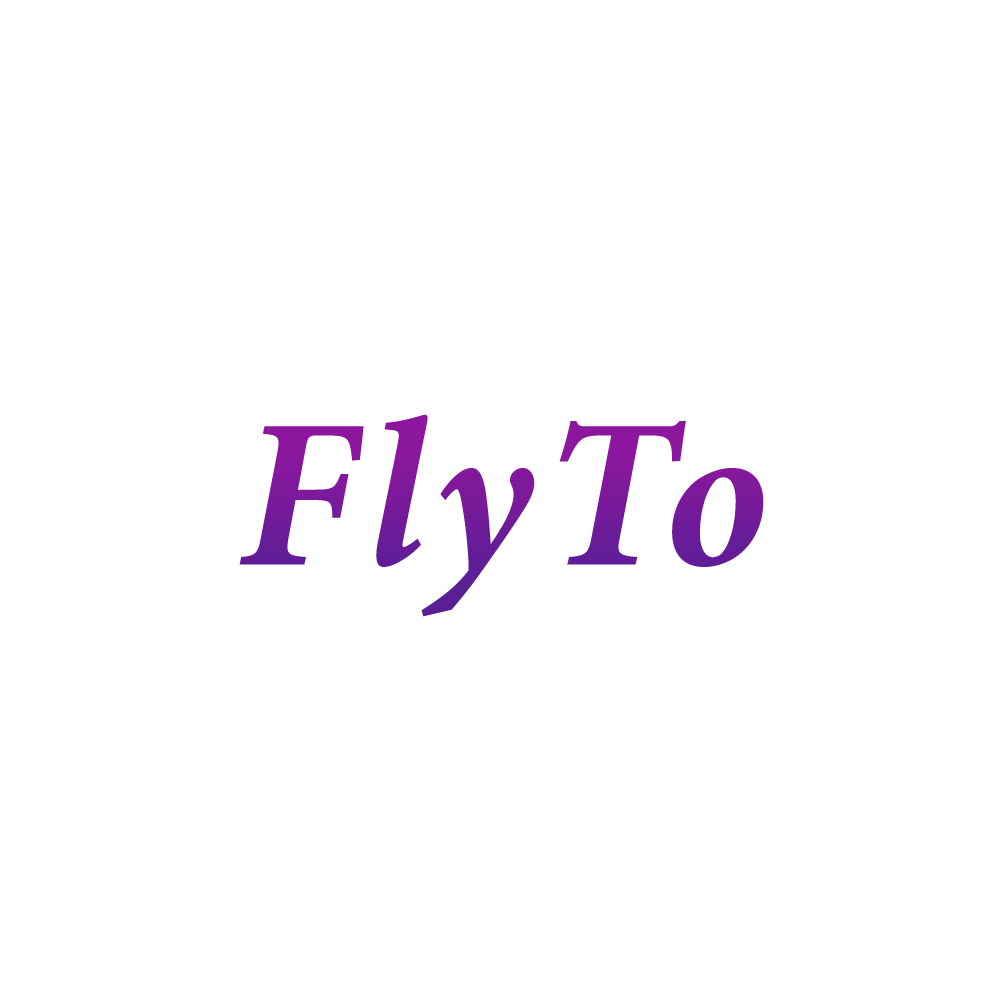
<style>
.page{position:relative;width:1000px;height:1000px;background:#ffffff}
.page>*{position:absolute;margin:0}
.t1{font:212.5px "MinionPro-BoldIt";letter-spacing:0.05em;color:#791a9a}
</style>
<div class="page">
<p class="t1" style="left:239px;top:414px;width:525px;height:203px">FlyTo</p>
</div>
